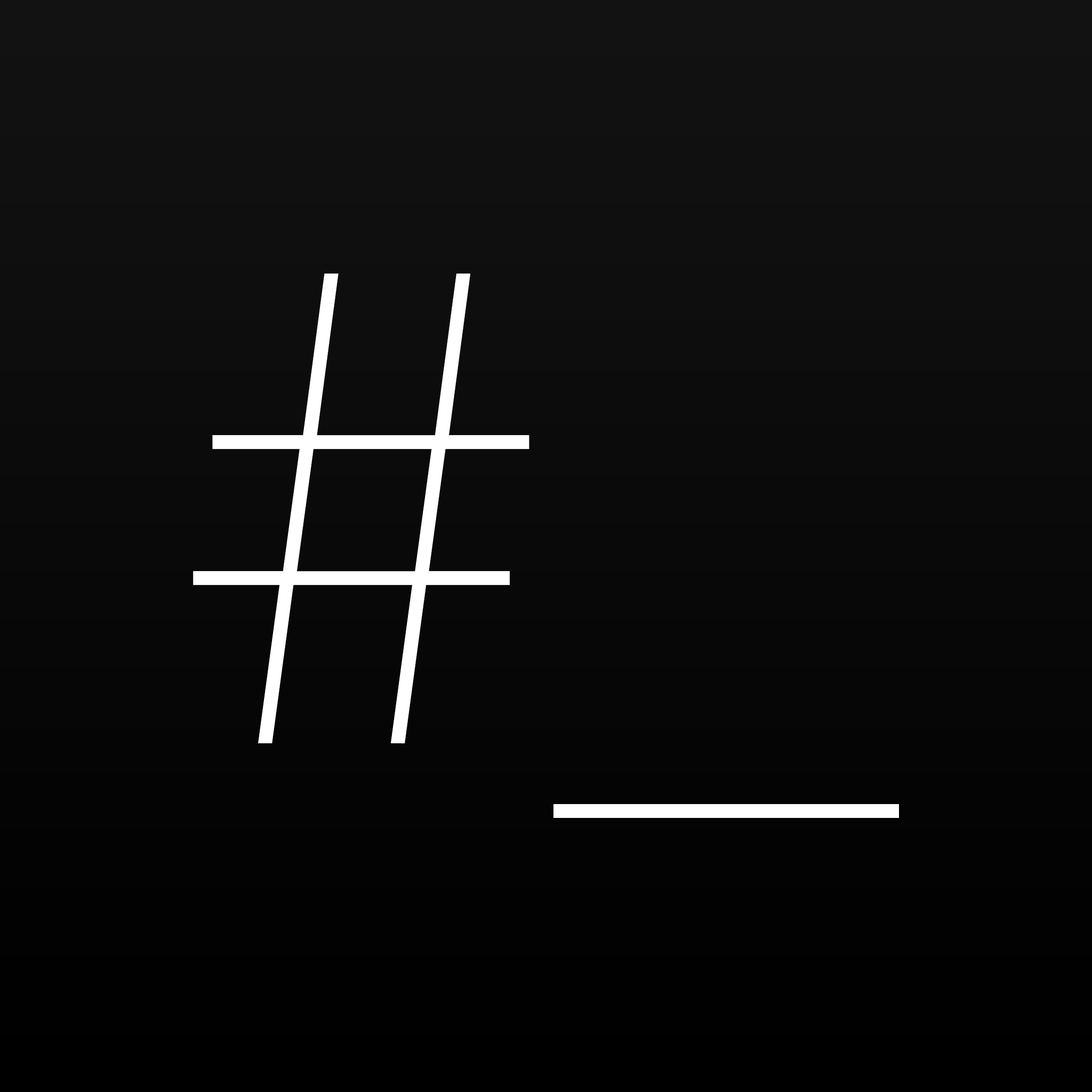
<style>
.page{position:relative;width:1092px;height:1092px}
.page>*{position:absolute;margin:0}
.t1{font:691px "HelveticaNeue-UltraLight";color:#ffffff}
</style>
<div class="page">
<p class="t1" style="left:193px;top:274px;width:706px;height:544px">#_</p>
</div>
